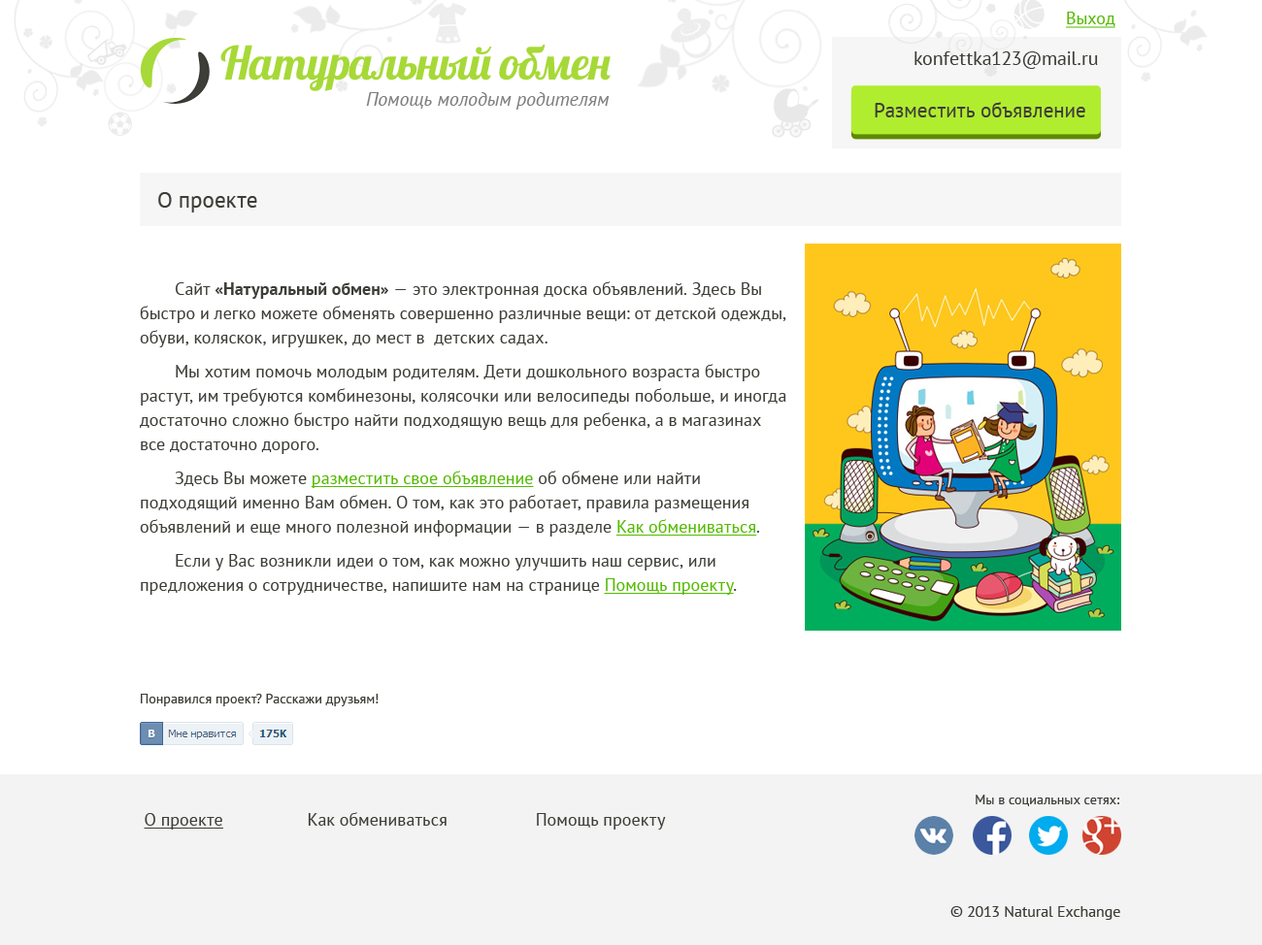
<style>
.page{position:relative;width:1262px;height:945px;background:#ffffff}
.page>*{position:absolute;margin:0}
.t1{font:17.5px "PTSans-Regular";color:#53ba00;text-decoration:underline}
.t2{font:46px "Lobster";letter-spacing:-0.08em;color:#a6d937}
.t3{font:19.4px "PTSans-Regular";color:#3e3e38}
.t4{font:19.4px "PTSans-Italic";color:#7f7f7f}
.t5{font:20.4px "PTSans-Regular";color:#3e3e38}
.t6{font:22.3px "PTSans-Regular";color:#3e3e38}
.t7{font:17.5px/24.3px "PTSans-Regular";color:#3e3e38}
.t8{font:17.5px/24.3px "PTSans-Bold";color:#3e3e38}
.t9{font:17.5px/34px "PTSans-Regular";color:#3e3e38}
.t10{font:17.5px/34px "PTSans-Regular";color:#53ba00;text-decoration:underline}
.t11{font:17.5px/24.3px "PTSans-Regular";color:#53ba00;text-decoration:underline}
.t12{font:13.6px "PTSans-Regular";color:#3e3e38}
.t13{font:17.5px "PTSans-Regular";color:#3e3e38}
.t14{font:17.5px "PTSans-Regular";color:#3e3e38;text-decoration:underline}
.t15{font:15.5px "PTSans-Regular";color:#3e3e38}
</style>
<div class="page">
<p class="t1" style="left:1066px;top:12px;width:49px;height:16px">Выход</p>
<p class="t2" style="left:220px;top:45px;width:390px;height:46px">Натуральный  обмен</p>
<p class="t3" style="left:914px;top:51px;width:184px;height:18px">konfettka123@mail.ru</p>
<p class="t4" style="left:366px;top:92px;width:243px;height:18px">Помощь молодым родителям</p>
<p class="t5" style="left:874px;top:102px;width:211px;height:15px">Разместить объявление</p>
<p class="t6" style="left:158px;top:192px;width:99px;height:21px">О проекте</p>
<p class="t7" style="left:140px;top:281px;width:646px;height:314px">Сайт <span class="t8">«Натуральный обмен»</span> — это электронная доска объявлений. Здесь Вы быстро и легко можете обменять совершенно различные вещи: от детской одежды, обуви, коляскок, игрушкек, до мест в  детских садах.<br> <span class="t9">Мы хотим помочь молодым родителям. Дети дошкольного возраста быстро </span>растут, им требуются комбинезоны, колясочки или велосипеды побольше, и иногда достаточно сложно быстро найти подходящую вещь для ребенка, а в магазинах все достаточно дорого.<br><span class="t9"> Здесь Вы можете </span><span class="t10">разместить свое объявление</span><span class="t9"> об обмене или найти </span>подходящий именно Вам обмен. О том, как это работает, правила размещения объявлений и еще много полезной информации — в разделе <span class="t11">Как обмениваться</span>.<br> <span class="t9">Если у Вас возникли идеи о том, как можно улучшить наш сервис, или </span>предложения о сотрудничестве, напишите нам на странице <span class="t11">Помощь проекту</span>.</p>
<p class="t12" style="left:141px;top:694px;width:237px;height:12px">Понравился проект? Расскажи друзьям!</p>
<p class="t12" style="left:975px;top:795px;width:144px;height:11px">Мы в социальных сетях:</p>
<p class="t13" style="left:144px;top:812px;width:522px;height:18px"><span class="t14">О проекте</span>       Как обмениваться            Помощь  проекту</p>
<p class="t15" style="left:950px;top:906px;width:170px;height:14px">© 2013 Natural Exchange</p>
</div>
